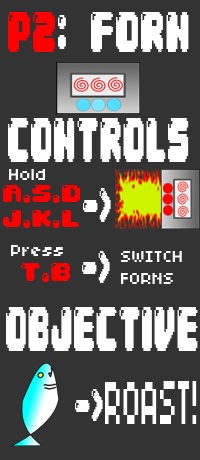
<style>
.page{position:relative;width:200px;height:460px;background:#333333}
.page>*{position:absolute;margin:0}
.t1{font:48.7px "04b30";color:#ffffff;scale:0.55 1}
.t2{font:48.7px "04b30";color:#ff0000;scale:0.55 1}
.t3{font:53px "04b30";color:#ffffff;scale:0.46 1}
.t4{font:18px "04b03";color:#ffffff}
.t5{font:20.8px "04b30";color:#ff0000;scale:1.05 1}
.t6{font:41.1px "04b30";color:#ffffff;scale:0.5 1}
.t7{font:38.7px "04b30";color:#ffffff;scale:0.53 1}
.t8{font:18px "04b03";color:#fefefe}
.t9{font:21.3px "04b30";color:#ff0000;scale:1.06 1}
.t10{font:53.9px "04b30";color:#fefefe;scale:0.45 1}
.t11{font:68.7px "04b03";color:#ffffff;scale:0.42 1}
</style>
<div class="page">
<p class="t1" style="left:8px;top:12px;width:181px;height:40px"><span class="t2">P2</span>: FORN</p>
<p class="t3" style="left:8px;top:118px;width:181px;height:44px">CONTROLS</p>
<p class="t4" style="left:9px;top:169px;width:36px;height:11px">Hold</p>
<p class="t5" style="left:3px;top:185px;width:77px;height:43px">A,S,D<br>J,K,L</p>
<p class="t6" style="left:83px;top:188px;width:28px;height:34px">-&gt;</p>
<p class="t4" style="left:11px;top:245px;width:52px;height:11px">Press</p>
<p class="t7" style="left:82px;top:251px;width:28px;height:32px">-&gt;</p>
<p class="t8" style="left:121px;top:251px;width:61px;height:33px">SWITCH<br>FORNS</p>
<p class="t9" style="left:21px;top:263px;width:50px;height:19px">T,B</p>
<p class="t10" style="left:6px;top:307px;width:192px;height:44px">OBJECTIVE</p>
<p class="t7" style="left:75px;top:389px;width:28px;height:32px">-&gt;</p>
<p class="t11" style="left:105px;top:381px;width:92px;height:43px">ROAST!</p>
</div>
